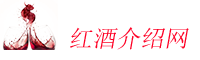
<style>
.page{position:relative;width:200px;height:60px;background:#ffffff}
.page>*{position:absolute;margin:0}
.t1{font:24px "SimSun";color:#fe0024;font-style:italic}
</style>
<div class="page">
<p class="t1" style="left:70px;top:27px;width:119px;height:23px">红酒介绍网</p>
</div>
